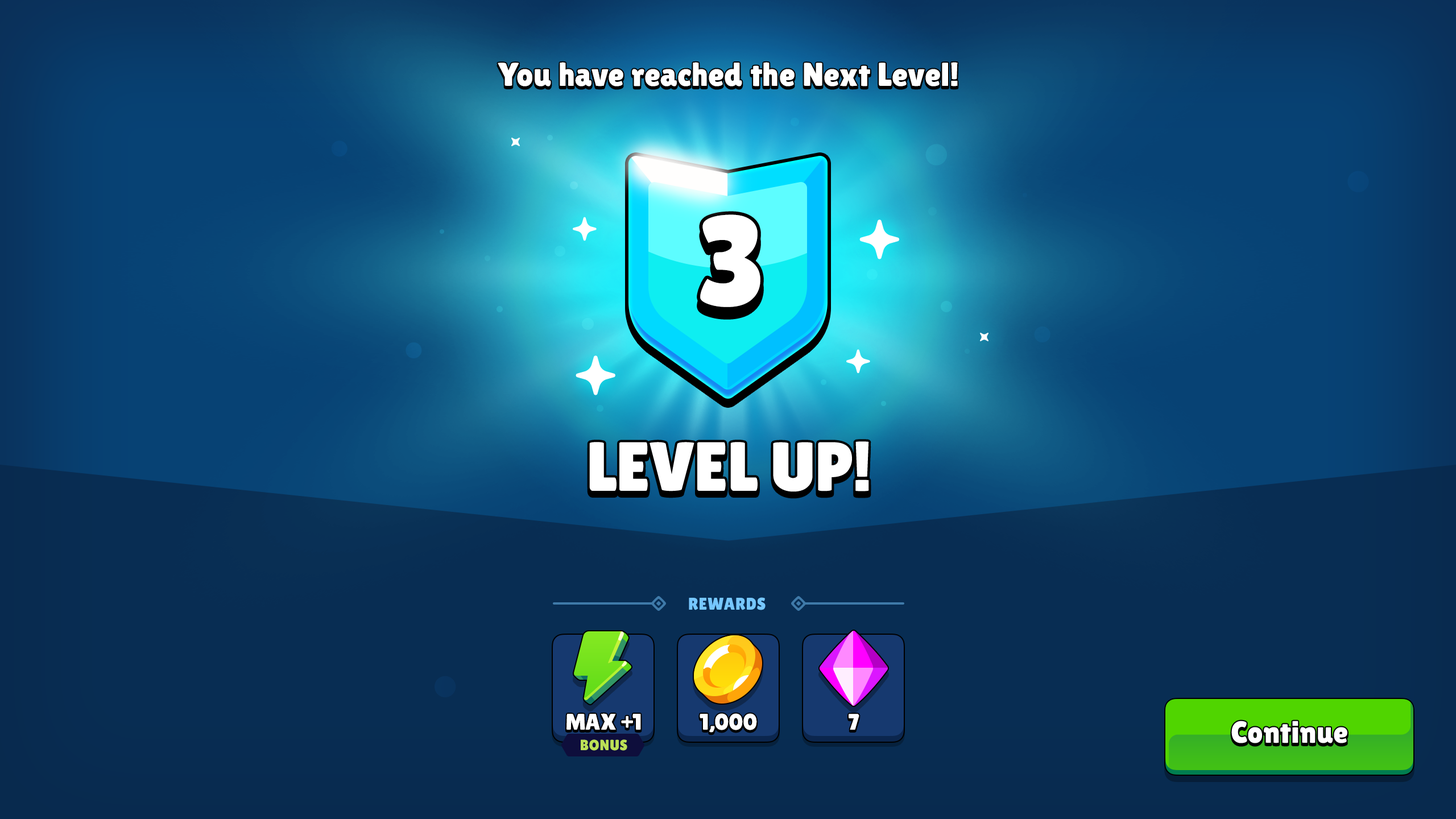
<style>
.page{position:relative;width:1456px;height:819px}
.page>*{position:absolute;margin:0}
.t1{font:33px "LilitaOne";letter-spacing:0.02em;color:#ffffff}
.t2{font:128px "LilitaOne";color:#ffffff}
.t3{font:69.4px "LilitaOne";color:#ffffff;text-transform:uppercase}
.t4{font:17.1px "LilitaOne";color:#76c7ff;text-transform:uppercase}
.t5{font:22.7px "LilitaOne";color:#ffffff;text-transform:uppercase}
.t6{font:30.7px "LilitaOne";letter-spacing:0.02em;color:#ffffff}
.t7{font:14.8px "LilitaOne";color:#bce056;text-transform:uppercase}
</style>
<div class="page">
<p class="t1" style="left:498px;top:62px;width:460px;height:24px">You have reached the Next Level!</p>
<p class="t2" style="left:700px;top:214px;width:60px;height:93px">3</p>
<p class="t3" style="left:589px;top:441px;width:280px;height:51px">Level up!</p>
<p class="t4" style="left:689px;top:597px;width:77px;height:13px">Rewards</p>
<p class="t5" style="left:566px;top:713px;width:75px;height:17px">max +1</p>
<p class="t5" style="left:700px;top:713px;width:57px;height:20px">1,000</p>
<p class="t5" style="left:849px;top:714px;width:10px;height:16px">7</p>
<p class="t6" style="left:1231px;top:721px;width:116px;height:22px">Continue</p>
<p class="t7" style="left:581px;top:739px;width:46px;height:12px">Bonus</p>
</div>
